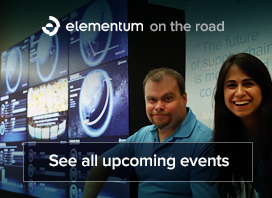
<style>
.page{position:relative;width:272px;height:198px}
.page>*{position:absolute;margin:0}
.t1{font:15px "ProximaNova-Semibold";letter-spacing:-0.012em;color:#a5a7a6}
.t2{font:17px "ProximaNova-Semibold";letter-spacing:-0.012em;color:#ffffff}
</style>
<div class="page">
<p class="t1" style="left:150px;top:21px;width:74px;height:11px">on the road</p>
<p class="t2" style="left:49px;top:154px;width:180px;height:16px">See all upcoming events</p>
</div>
